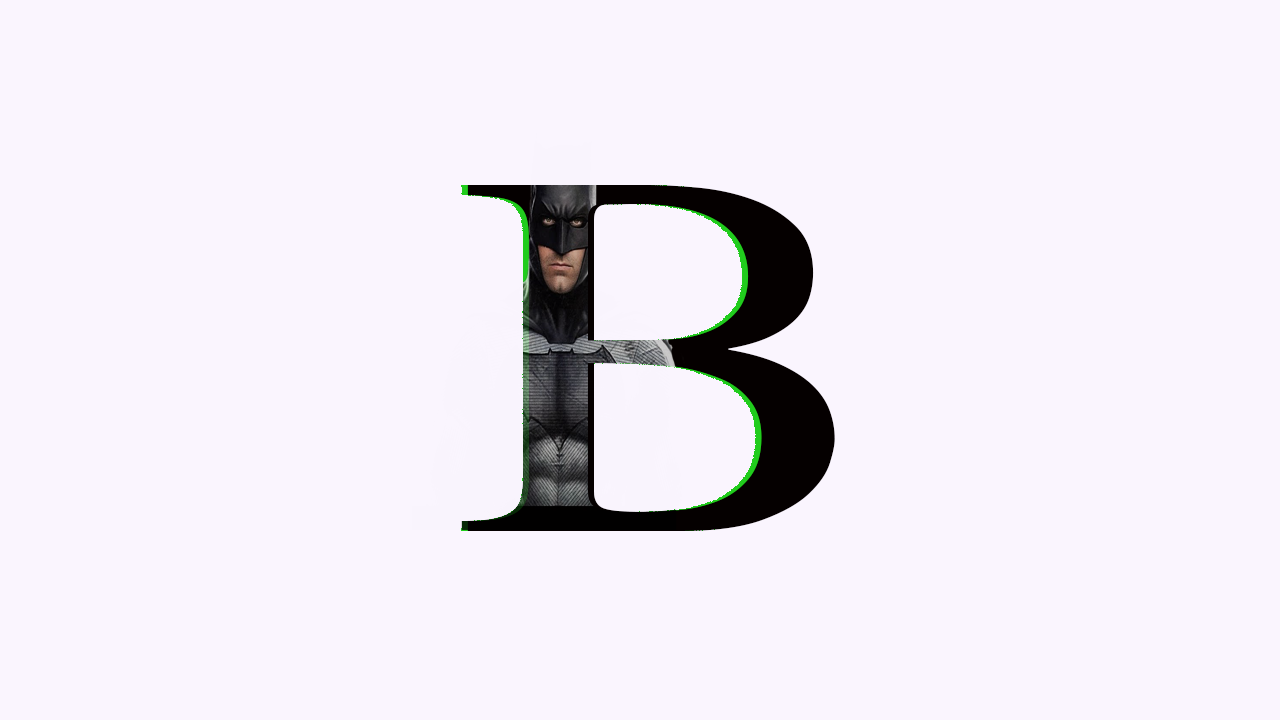
<style>
.page{position:relative;width:1280px;height:720px;background:#faf5fe}
.page>*{position:absolute;margin:0}
.t1{font:521.8px "Thames";color:#050000;scale:1.22 1}
</style>
<div class="page">
<p class="t1" style="left:467px;top:185px;width:368px;height:346px">B</p>
</div>
